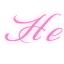
<style>
.page{position:relative;width:64px;height:64px;background:#ffffff}
.page>*{position:absolute;margin:0}
.t1{font:53.9px "ShitHappens-Cursive";letter-spacing:0.1em;color:#e78cc4}
</style>
<div class="page">
<p class="t1" style="left:5px;top:13px;width:58px;height:30px">He</p>
</div>
